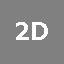
<style>
.page{position:relative;width:64px;height:64px;background:#808080}
.page>*{position:absolute;margin:0}
.t1{font:24px "Verdana-Bold";color:#ffffff;scale:0.95 1}
</style>
<div class="page">
<p class="t1" style="left:16px;top:22px;width:32px;height:18px">2D</p>
</div>
